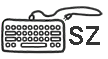
<style>
.page{position:relative;width:108px;height:59px;background:#ffffff}
.page>*{position:absolute;margin:0}
.t1{font:25.9px "Roboto-Medium";letter-spacing:0.08em;color:#333333}
</style>
<div class="page">
<p class="t1" style="left:69px;top:26px;width:31px;height:19px">SZ</p>
</div>
